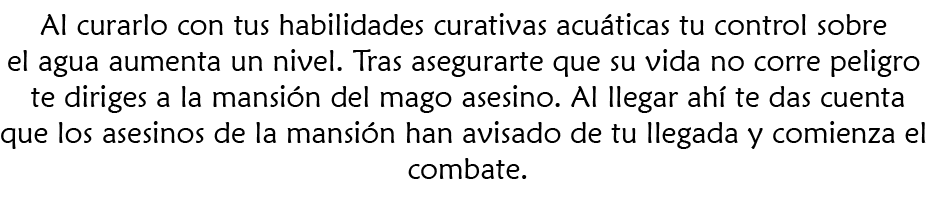
<style>
.page{position:relative;width:931px;height:197px;background:#ffffff}
.page>*{position:absolute;margin:0}
.t1{font:30px "MaiandraGD-Regular";color:#000000}
</style>
<div class="page">
<p class="t1" style="left:1px;top:13px;width:925px;height:166px;text-align:center">Al curarlo con tus habilidades curativas acuáticas tu control sobre <br>el agua aumenta un nivel. Tras asegurarte que su vida no corre peligro <br>te diriges a la mansión del mago asesino. Al llegar ahí te das cuenta<br>que los asesinos de la mansión han avisado de tu llegada y comienza el <br>combate.</p>
</div>
